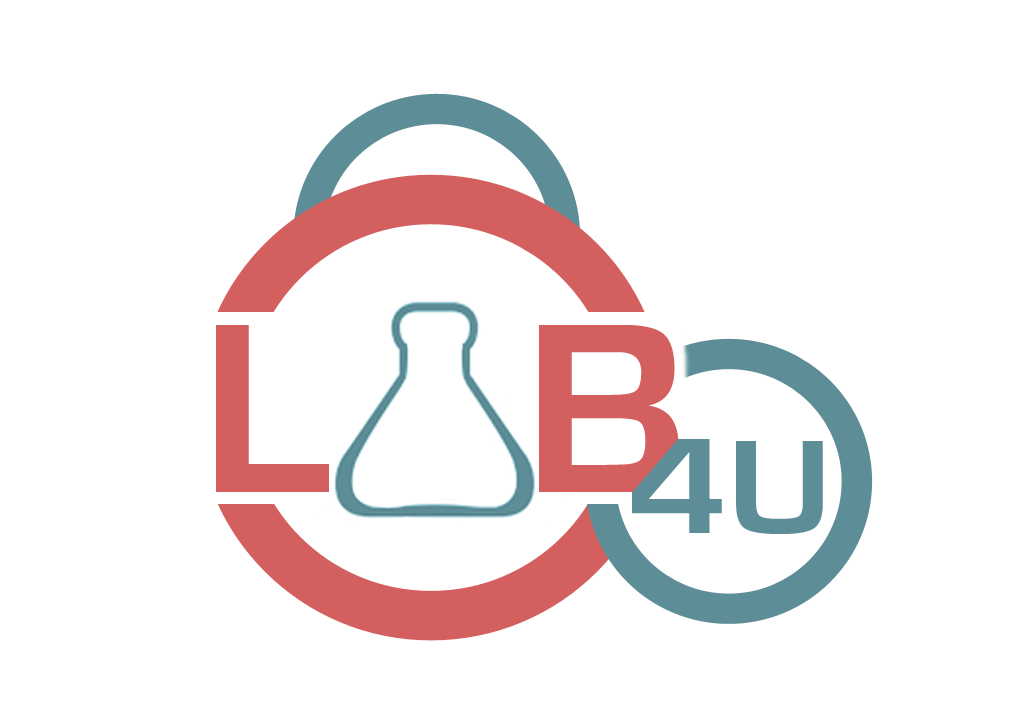
<style>
.page{position:relative;width:1024px;height:720px;background:#ffffff}
.page>*{position:absolute;margin:0}
.t1{font:251px "EurostileBold";color:#d45f5f}
.t2{font:141.2px "EurostileBold";color:#5d8e98;scale:1.13 1}
.t3{font:138.4px "EurostileBold";color:#5d8e98;scale:1.13 1}
</style>
<div class="page">
<p class="t1" style="left:216px;top:325px;width:463px;height:167px">L   B</p>
<p class="t2" style="left:632px;top:439px;width:191px;height:95px">4<span class="t3">U</span></p>
</div>
